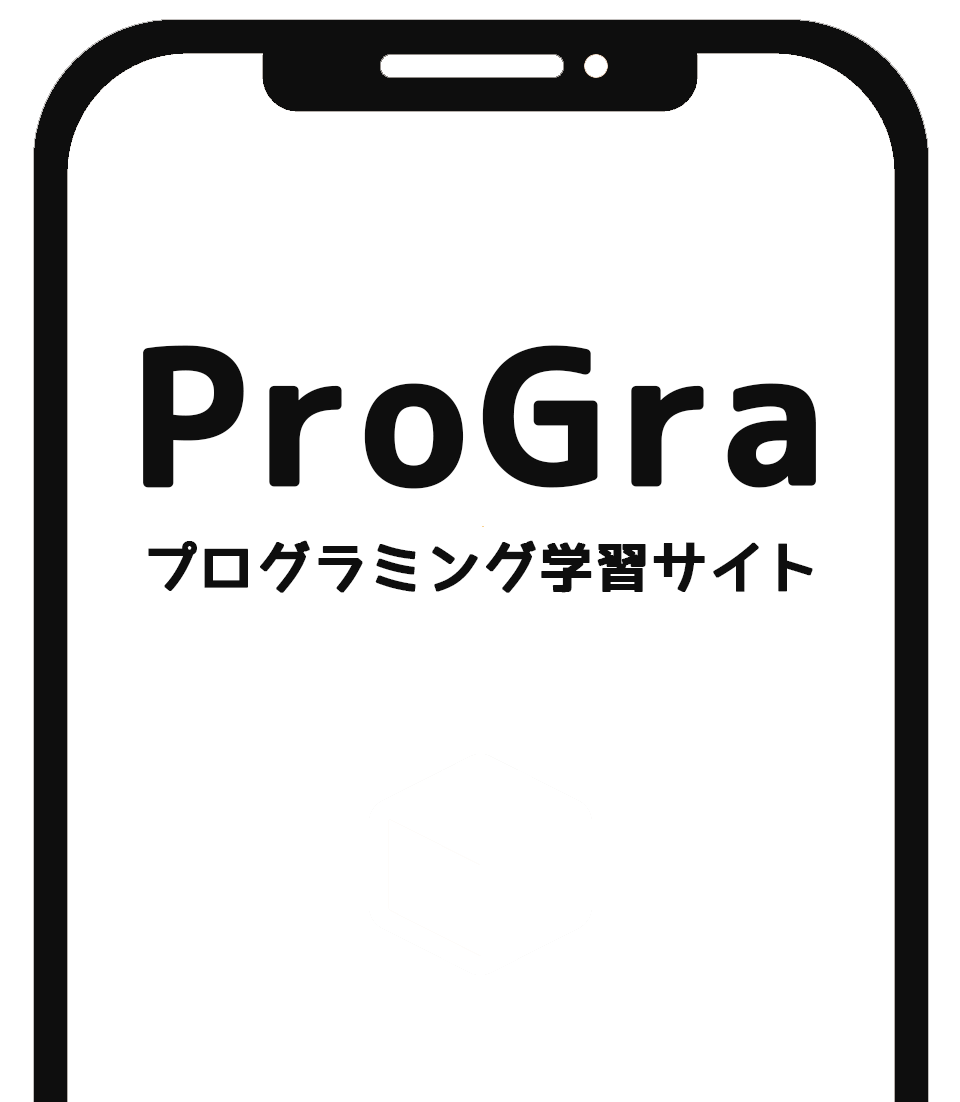
<style>
.page{position:relative;width:960px;height:1102px;background:#ffffff}
.page>*{position:absolute;margin:0}
.t1{font:184px "07YasashisaGothicBold";letter-spacing:0.04em;color:#0e0e0e;font-weight:bold}
.t2{font:53px "07YasashisaGothicBold";letter-spacing:0.04em;color:#0e0e0e;font-weight:bold}
</style>
<div class="page">
<p class="t1" style="left:143px;top:345px;width:673px;height:144px">ProGra</p>
<p class="t2" style="left:148px;top:540px;width:665px;height:53px">プログラミング学習サイト</p>
</div>
